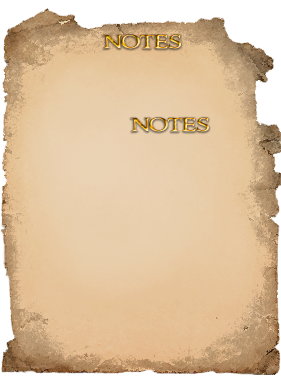
<style>
.page{position:relative;width:281px;height:384px}
.page>*{position:absolute;margin:0}
.t1{font:21.8px "RingbearerMedium";scale:1.29 1}
</style>
<div class="page">
<p class="t1" style="left:130px;top:117px;width:79px;height:15px">notes</p>
</div>
